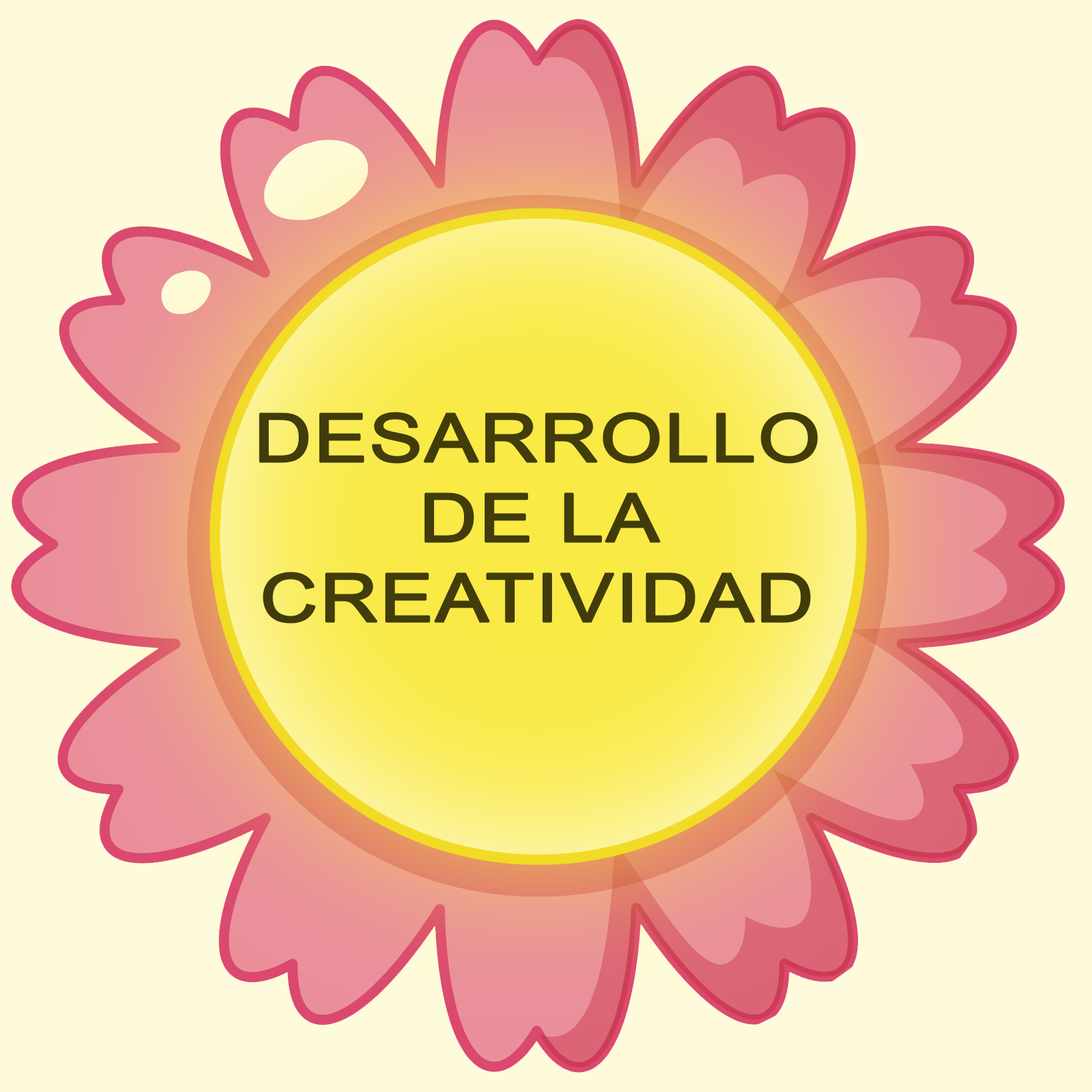
<style>
.page{position:relative;width:1092px;height:1092px;background:#fefbdc}
.page>*{position:absolute;margin:0}
.t1{font:66.6px "ArialMT";color:#413c09;font-weight:bold;scale:1.2 1}
.t2{font:38.9px "ArialMT";color:#413c09;font-weight:bold;scale:1.2 1}
</style>
<div class="page">
<p class="t1" style="left:259px;top:412px;width:559px;height:212px;text-align:center"><span class="t2"><br><br><br><br></span>DESARROLLO DE LA <br>CREATIVIDAD</p>
</div>
